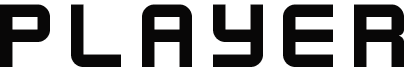
<style>
.page{position:relative;width:404px;height:70px;background:#ffffff}
.page>*{position:absolute;margin:0}
.t1{font:100px "KenVector-Future-Thin";color:#080707}
</style>
<div class="page">
<p class="t1" style="left:0px;top:4px;width:404px;height:63px">Player</p>
</div>
